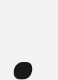
<style>
.page{position:relative;width:58px;height:80px;background:#f3f3f3}
.page>*{position:absolute;margin:0}
.t1{font:100px "AdobeHeitiStd-Regular";letter-spacing:0.04em;color:#191919;font-weight:bold;font-style:italic}
</style>
<div class="page">
<p class="t1" style="left:13px;top:62px;width:20px;height:18px">.</p>
</div>
